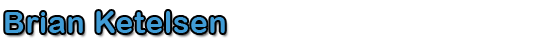
<style>
.page{position:relative;width:550px;height:45px;background:#ffffff}
.page>*{position:absolute;margin:0}
.t1{font:30px "ArialRoundedMTBold";letter-spacing:0.025em;color:#409cd6}
</style>
<div class="page">
<p class="t1" style="left:5px;top:11px;width:220px;height:22px">Brian Ketelsen</p>
</div>
